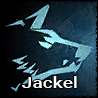
<style>
.page{position:relative;width:98px;height:98px}
.page>*{position:absolute;margin:0}
.t1{font:16px "Roboto-Medium";color:#ffffff;scale:1.2 1}
</style>
<div class="page">
<p class="t1" style="left:22px;top:76px;width:55px;height:12px">Jackel</p>
</div>
